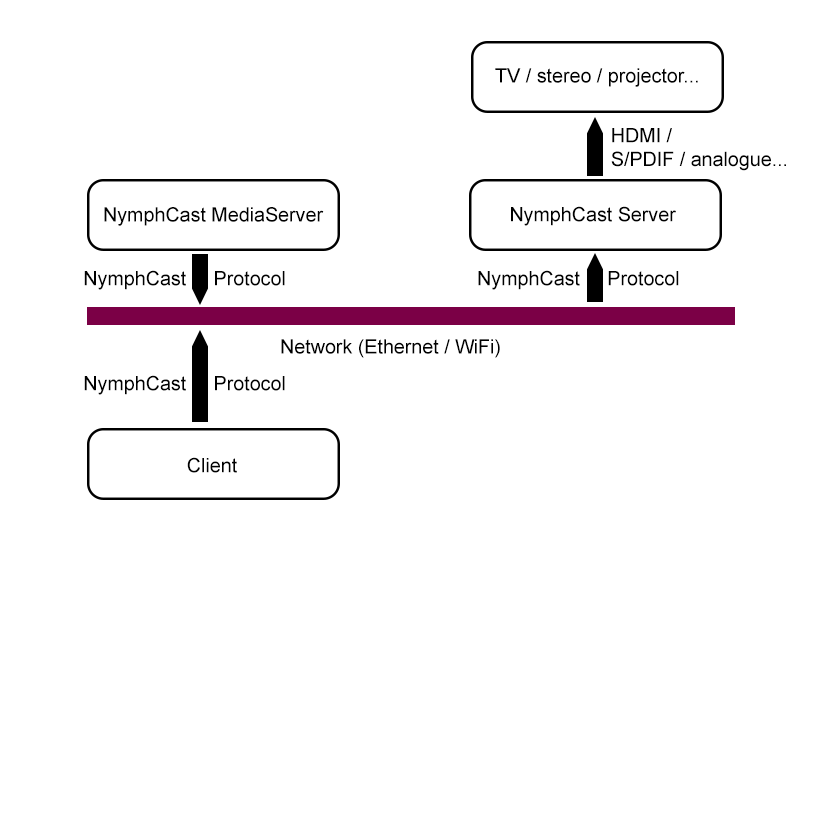
<style>
.page{position:relative;width:840px;height:840px;background:#ffffff}
.page>*{position:absolute;margin:0}
.t1{font:19.7px "ArialMT";color:#000000}
</style>
<div class="page">
<p class="t1" style="left:495px;top:68px;width:203px;height:19px">TV / stereo / projector...</p>
<p class="t1" style="left:611px;top:128px;width:175px;height:43px;text-align:right">HDMI /     <br>S/PDIF / analogue...</p>
<p class="t1" style="left:104px;top:207px;width:220px;height:19px">NymphCast MediaServer</p>
<p class="t1" style="left:511px;top:206px;width:165px;height:20px">NymphCast Server</p>
<p class="t1" style="left:84px;top:270px;width:201px;height:20px">NymphCast     Protocol</p>
<p class="t1" style="left:478px;top:270px;width:201px;height:20px">NymphCast     Protocol</p>
<p class="t1" style="left:281px;top:339px;width:219px;height:19px">Network (Ethernet / WiFi)</p>
<p class="t1" style="left:84px;top:375px;width:201px;height:20px">NymphCast     Protocol</p>
<p class="t1" style="left:187px;top:457px;width:50px;height:16px">Client</p>
</div>
